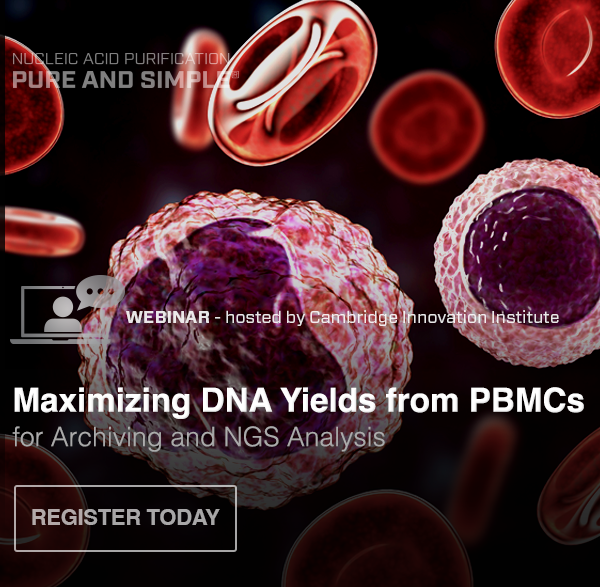
<style>
.page{position:relative;width:600px;height:587px}
.page>*{position:absolute;margin:0}
.t1{font:17.3px "Forza-Book";color:#ebe7e9}
.t2{font:17.3px "Forza-Bold";color:#ebe7e9;text-transform:uppercase}
.t3{font:17.3px "Forza-Book";color:#ebe7e9;text-transform:uppercase}
.t4{font:33.2px/34.3px "Helvetica-Bold";color:#ffffff}
.t5{font:26.6px/34.3px "Helvetica-Light";color:#acacac}
.t6{font:21.9px "Helvetica-Bold";letter-spacing:-0.01em;color:#a8a7a7;text-transform:uppercase}
</style>
<div class="page">
<p class="t1" style="left:126px;top:310px;width:433px;height:16px"><span class="t2">WEBINAR </span><span class="t3">- </span>hosted by Cambridge Innovation Institute</p>
<p class="t4" style="left:12px;top:387px;width:572px;height:65px">Maximizing DNA Yields from PBMCs<br><span class="t5">for Archiving and NGS Analysis</span></p>
<p class="t6" style="left:32px;top:509px;width:188px;height:16px">Register Today</p>
</div>
